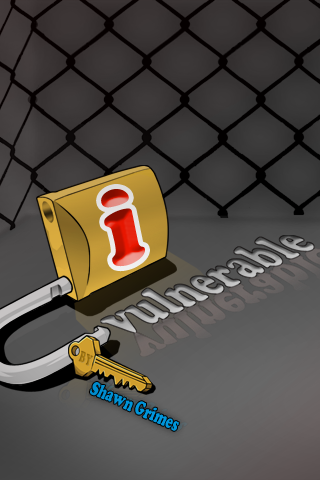
<style>
.page{position:relative;width:320px;height:480px}
.page>*{position:absolute;margin:0}
.t1{font:101.5px "CooperBlack"}
.t2{font:16.3px "CooperBlack";color:#a3760f;scale:0.55 1}
.t3{font:20.1px "CooperBlack";color:#0094da;scale:0.64 1}
</style>
<div class="page">
<p class="t1" style="left:101px;top:189px;width:44px;height:78px;rotate:-11deg">i</p>
<p class="t2" style="left:78px;top:350px;width:16px;height:16px;rotate:26deg">BY</p>
<p class="t3" style="left:90px;top:382px;width:89px;height:49px;rotate:24deg">Shawn Grimes</p>
</div>
